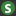
<style>
.page{position:relative;width:16px;height:16px;background:#333333}
.page>*{position:absolute;margin:0}
.t1{font:12px "MyriadPro-Bold";color:#ffffff}
</style>
<div class="page">
<p class="t1" style="left:5px;top:4px;width:6px;height:9px">S</p>
</div>
